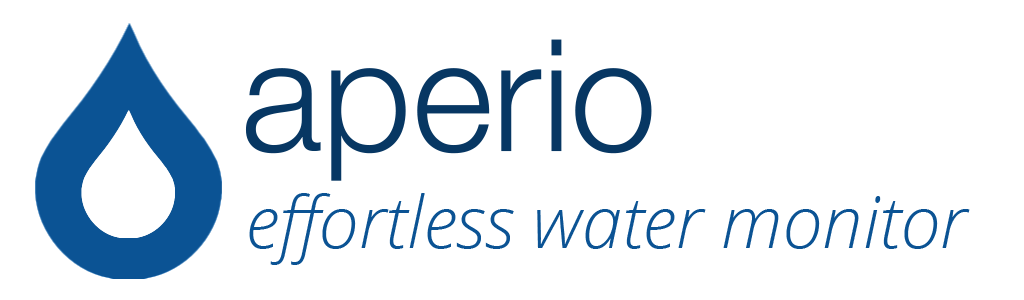
<style>
.page{position:relative;width:1024px;height:300px;background:#ffffff}
.page>*{position:absolute;margin:0}
.t1{font:156px "HelveticaNeue-Light";color:#073763}
.t2{font:72px "OpenSansLight-Italic";color:#0b5394}
</style>
<div class="page">
<p class="t1" style="left:245px;top:39px;width:407px;height:142px">aperio</p>
<p class="t2" style="left:249px;top:193px;width:721px;height:72px">effortless water monitor</p>
</div>
